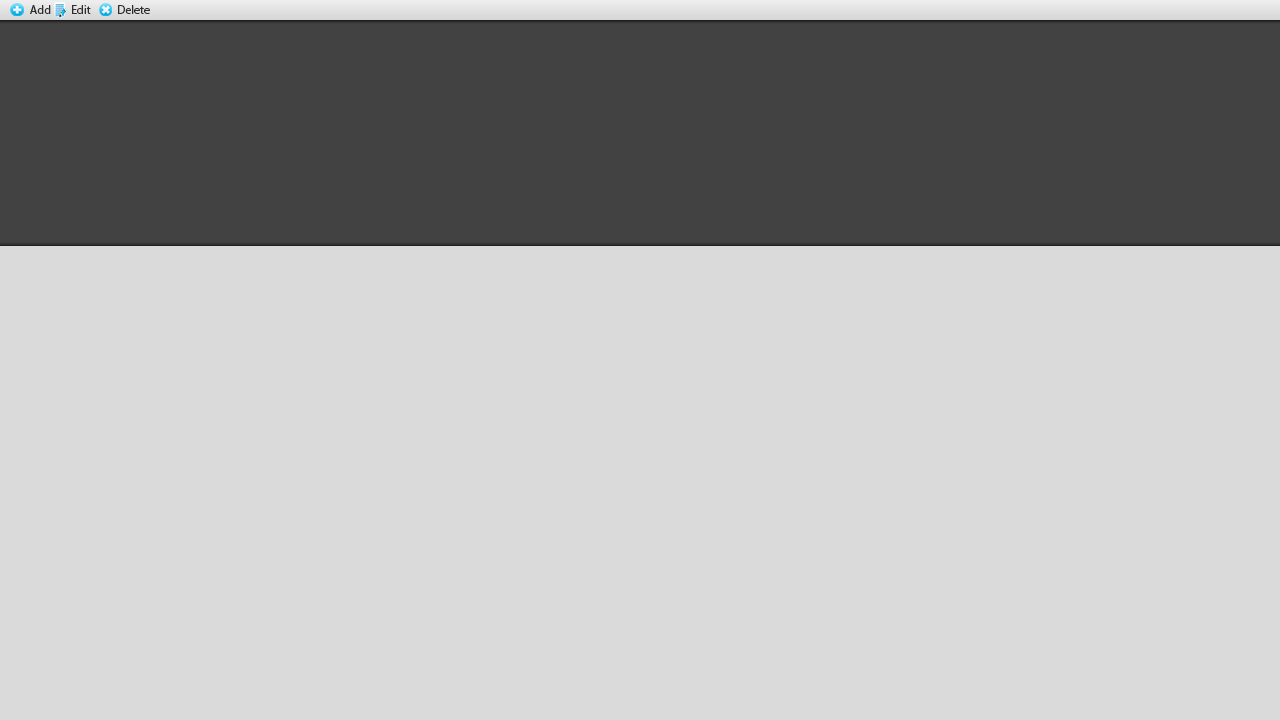
<style>
.page{position:relative;width:1280px;height:720px;background:#dadada}
.page>*{position:absolute;margin:0}
.t1{font:12px "MyriadPro-Regular";color:#2e2d2d}
</style>
<div class="page">
<p class="t1" style="left:30px;top:5px;width:21px;height:9px">Add</p>
<p class="t1" style="left:72px;top:5px;width:19px;height:9px">Edit</p>
<p class="t1" style="left:118px;top:5px;width:32px;height:9px">Delete</p>
</div>
